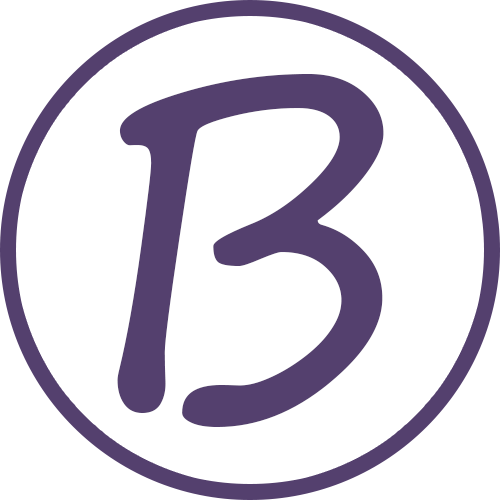
<style>
.page{position:relative;width:500px;height:500px;background:#ffffff}
.page>*{position:absolute;margin:0}
.t1{font:450px "SegoePrint";letter-spacing:-0.025em;color:#54406e}
</style>
<div class="page">
<p class="t1" style="left:117px;top:74px;width:267px;height:353px">B</p>
</div>
